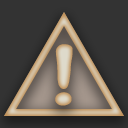
<style>
.page{position:relative;width:128px;height:128px;background:#333333}
.page>*{position:absolute;margin:0}
.t1{font:91.7px "DresdenElektronik"}
</style>
<div class="page">
<p class="t1" style="left:55px;top:44px;width:18px;height:62px">!</p>
</div>
